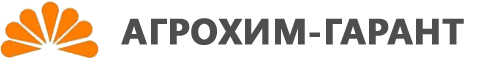
<style>
.page{position:relative;width:500px;height:58px;background:#ffffff}
.page>*{position:absolute;margin:0}
.t1{font:36px "SegoeUI-Bold";color:#4e4e4e;text-transform:uppercase;font-weight:bold}
</style>
<div class="page">
<p class="t1" style="left:121px;top:18px;width:343px;height:27px">Агрохим-гарант</p>
</div>
